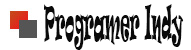
<style>
.page{position:relative;width:191px;height:50px;background:#ffffff}
.page>*{position:absolute;margin:0}
.t1{font:43.5px "Ravie";color:#0a0a0a;scale:0.3 1}
</style>
<div class="page">
<p class="t1" style="left:44px;top:4px;width:140px;height:46px">Programer Indy</p>
</div>
